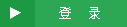
<style>
.page{position:relative;width:127px;height:27px;background:#2ca854}
.page>*{position:absolute;margin:0}
.t1{font:14.4px "MicrosoftYaHei";letter-spacing:0.1em;color:#ffffff;scale:0.83 1}
</style>
<div class="page">
<p class="t1" style="left:59px;top:7px;width:41px;height:12px">登   录</p>
</div>
